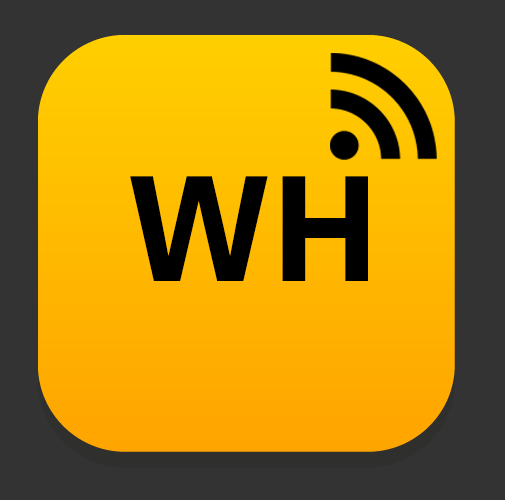
<style>
.page{position:relative;width:505px;height:500px;background:#333333}
.page>*{position:absolute;margin:0}
.t1{font:150px "IBMPlexSans-Bold";color:#000000}
</style>
<div class="page">
<p class="t1" style="left:130px;top:176px;width:238px;height:105px">WH</p>
</div>
